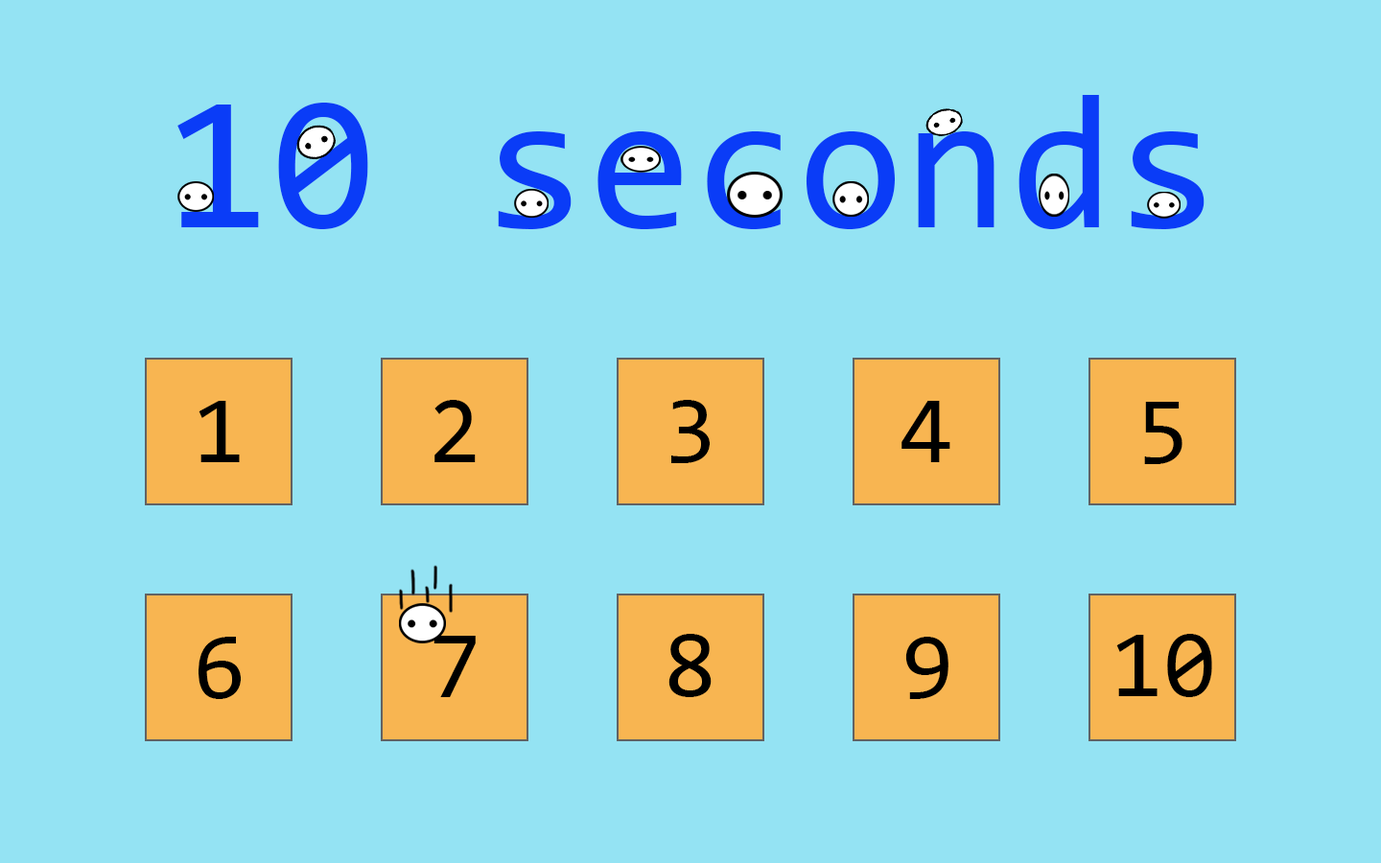
<style>
.page{position:relative;width:1381px;height:863px;background:#94e3f3}
.page>*{position:absolute;margin:0}
.t1{font:191.8px "Consolas";color:#0a3cf7}
.t2{font:95.9px "Consolas";color:#000000}
</style>
<div class="page">
<p class="t1" style="left:177px;top:95px;width:1028px;height:134px">10 seconds</p>
<p class="t2" style="left:199px;top:401px;width:41px;height:61px">1</p>
<p class="t2" style="left:435px;top:400px;width:41px;height:62px">2</p>
<p class="t2" style="left:671px;top:400px;width:39px;height:63px">3</p>
<p class="t2" style="left:902px;top:401px;width:49px;height:61px">4</p>
<p class="t2" style="left:1144px;top:402px;width:39px;height:62px">5</p>
<p class="t2" style="left:199px;top:637px;width:42px;height:62px">6</p>
<p class="t2" style="left:434px;top:636px;width:42px;height:61px">7</p>
<p class="t2" style="left:669px;top:634px;width:43px;height:63px">8</p>
<p class="t2" style="left:905px;top:637px;width:44px;height:62px">9</p>
<p class="t2" style="left:1117px;top:634px;width:95px;height:63px">10</p>
</div>
